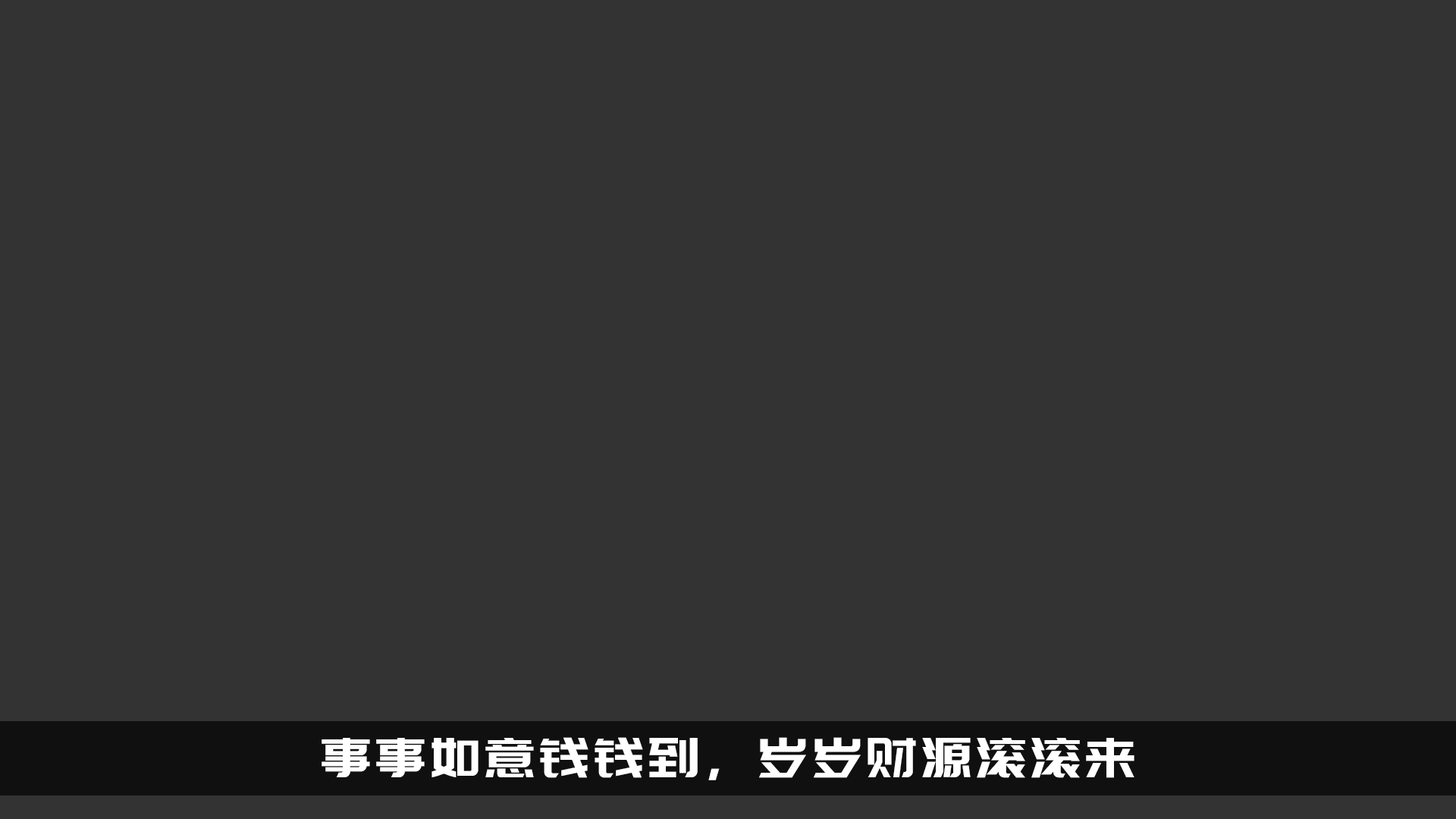
<style>
.page{position:relative;width:1456px;height:819px;background:#333333}
.page>*{position:absolute;margin:0}
.t1{font:54.6px "PangMenZhengDao-3";color:#ffffff}
</style>
<div class="page">
<p class="t1" style="left:322px;top:737px;width:812px;height:43px">事事如意钱钱到，岁岁财源滚滚来</p>
</div>
